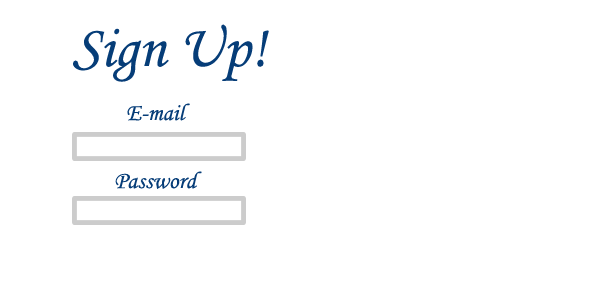
<style>
.page{position:relative;width:600px;height:300px;background:#ffffff}
.page>*{position:absolute;margin:0}
.t1{font:60px "MonotypeCorsiva";color:#063d78}
.t2{font:24px "MonotypeCorsiva";color:#063d78}
</style>
<div class="page">
<p class="t1" style="left:73px;top:24px;width:196px;height:58px">Sign Up!</p>
<p class="t2" style="left:127px;top:103px;width:63px;height:18px">E-mail</p>
<p class="t2" style="left:115px;top:171px;width:87px;height:18px">Password</p>
</div>
